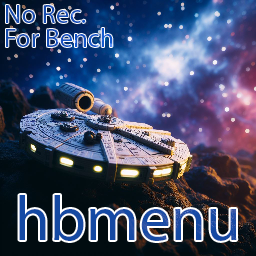
<style>
.page{position:relative;width:256px;height:256px}
.page>*{position:absolute;margin:0}
.t1{font:26.7px/24px "MyriadPro-Regular";color:#154db2}
.t2{font:63.3px "MyriadPro-Regular";color:#1549a3}
</style>
<div class="page">
<p class="t1" style="left:6px;top:5px;width:107px;height:42px">No Rec.<br>For Bench</p>
<p class="t2" style="left:19px;top:195px;width:218px;height:46px">hbmenu</p>
</div>
